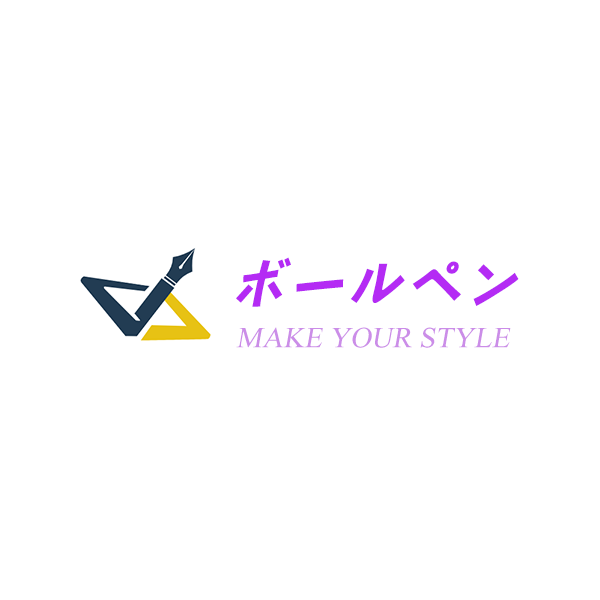
<style>
.page{position:relative;width:600px;height:600px;background:#ffffff}
.page>*{position:absolute;margin:0}
.t1{font:58.8px "DFYingHei-W7-WIN-BF";color:#b42bf4;font-style:italic}
.t2{font:43.5px "Microsoft-Himalaya";color:#cb8de8;font-style:italic}
</style>
<div class="page">
<p class="t1" style="left:236px;top:257px;width:283px;height:50px">ボールペン</p>
<p class="t2" style="left:236px;top:327px;width:275px;height:21px">MAKE YOUR STYLE</p>
</div>
